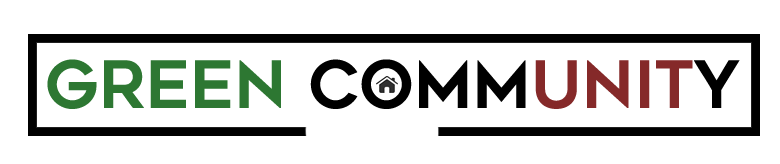
<style>
.page{position:relative;width:780px;height:164px;background:#ffffff}
.page>*{position:absolute;margin:0}
.t1{font:65px "Geometos";color:#2d7732}
.t2{font:65px "Geometos";color:#000000}
.t3{font:65px "Geometos";color:#852929}
</style>
<div class="page">
<p class="t1" style="left:47px;top:59px;width:693px;height:50px">GREEN<span class="t2"> COMM</span><span class="t3">UNIT</span><span class="t2">Y</span></p>
</div>
